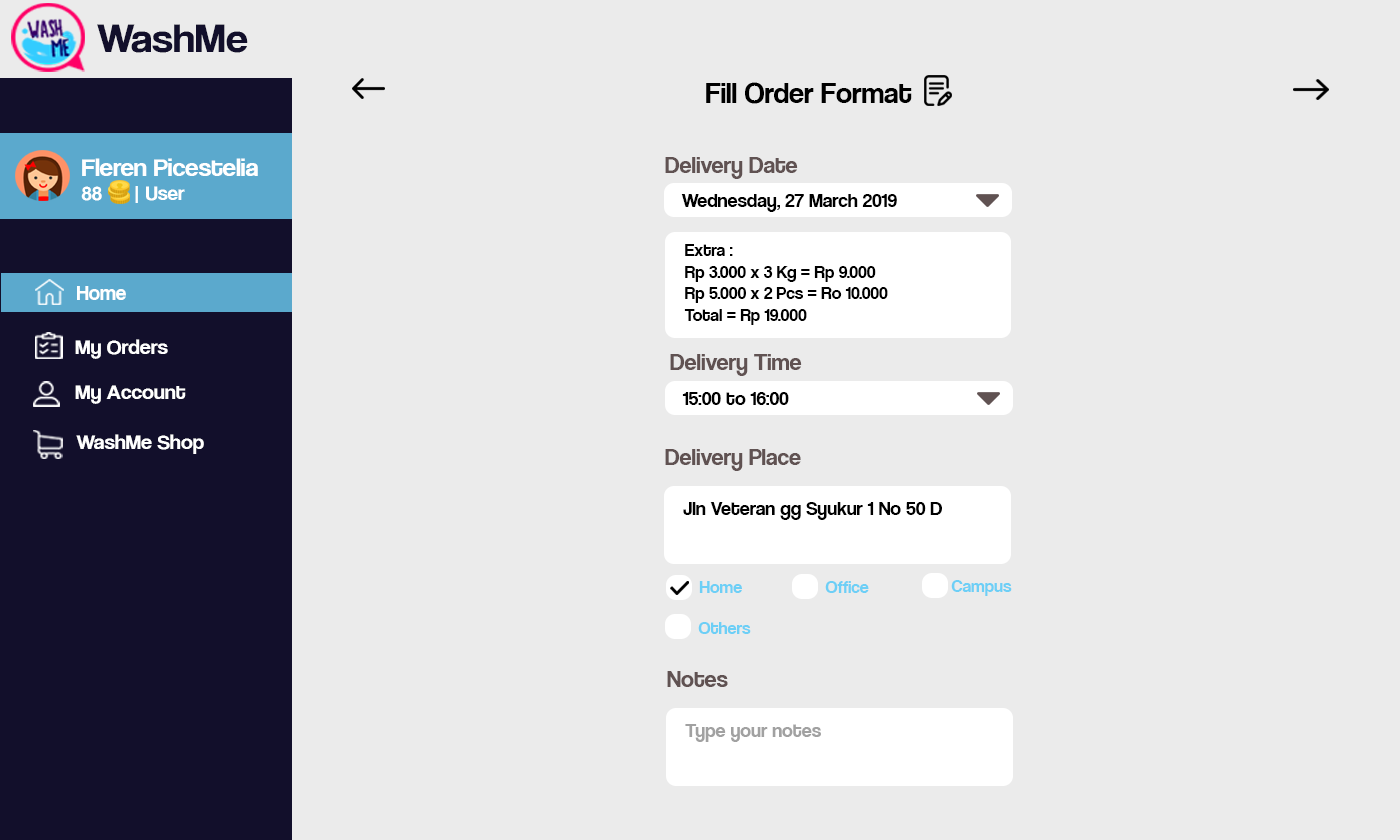
<style>
.page{position:relative;width:1400px;height:840px;background:#ebebeb}
.page>*{position:absolute;margin:0}
.t1{font:42.1px "CoolveticaRg-Regular";color:#120f2b;scale:1.05 1}
.t2{font:30px "CoolveticaRg-Regular";color:#000000}
.t3{font:25.2px "CoolveticaRg-Regular";color:#ffffff;scale:1.05 1}
.t4{font:20px "CoolveticaRg-Regular";color:#ffffff;scale:1.05 1}
.t5{font:24px "CoolveticaRg-Regular";color:#605252}
.t6{font:20px "CoolveticaRg-Regular";color:#000000}
.t7{font:18px "CoolveticaRg-Regular";color:#000000}
.t8{font:21px "CoolveticaRg-Regular";color:#ffffff}
.t9{font:21px "CoolveticaRg-Regular";color:#ffffff;scale:1.05 1}
.t10{font:18px "CoolveticaRg-Regular";color:#6dcff6}
.t11{font:20px "CoolveticaRg-Regular";color:#a1a1a1}
</style>
<div class="page">
<p class="t1" style="left:97px;top:24px;width:151px;height:29px">WashMe</p>
<p class="t2" style="left:706px;top:82px;width:206px;height:22px">Fill Order Format</p>
<p class="t3" style="left:81px;top:158px;width:177px;height:45px">Fleren Picestelia<br><span class="t4">88      | User</span></p>
<p class="t5" style="left:665px;top:157px;width:133px;height:22px">Delivery Date</p>
<p class="t6" style="left:681px;top:194px;width:216px;height:18px">Wednesday, 27 March 2019</p>
<p class="t7" style="left:684px;top:244px;width:204px;height:81px">Extra :<br>Rp 3.000 x 3 Kg = Rp 9.000<br>Rp 5.000 x 2 Pcs = Ro 10.000<br>Total = Rp 19.000</p>
<p class="t8" style="left:77px;top:286px;width:49px;height:14px">Home</p>
<p class="t9" style="left:75px;top:339px;width:93px;height:20px">My Orders</p>
<p class="t5" style="left:670px;top:354px;width:132px;height:22px">Delivery Time</p>
<p class="t9" style="left:75px;top:385px;width:111px;height:19px">My Account</p>
<p class="t6" style="left:682px;top:392px;width:107px;height:13px">15:00 to 16:00</p>
<p class="t9" style="left:76px;top:434px;width:128px;height:20px">WashMe Shop</p>
<p class="t5" style="left:665px;top:449px;width:136px;height:22px">Delivery Place</p>
<p class="t6" style="left:683px;top:502px;width:259px;height:18px">Jln Veteran gg Syukur 1 No 50 D</p>
<p class="t10" style="left:699px;top:581px;width:43px;height:12px">Home</p>
<p class="t10" style="left:825px;top:581px;width:44px;height:12px">Office</p>
<p class="t10" style="left:951px;top:580px;width:61px;height:16px">Campus</p>
<p class="t10" style="left:698px;top:622px;width:53px;height:12px">Others</p>
<p class="t5" style="left:667px;top:671px;width:61px;height:16px">Notes</p>
<p class="t11" style="left:685px;top:724px;width:136px;height:18px">Type your notes</p>
</div>
